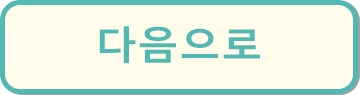
<style>
.page{position:relative;width:360px;height:95px;background:#fffceb}
.page>*{position:absolute;margin:0}
.t1{font:39.6px "MalgunGothicBold";letter-spacing:0.01em;color:#51b8b2;scale:1.05 1}
</style>
<div class="page">
<p class="t1" style="left:99px;top:26px;width:161px;height:38px">다음으로</p>
</div>
